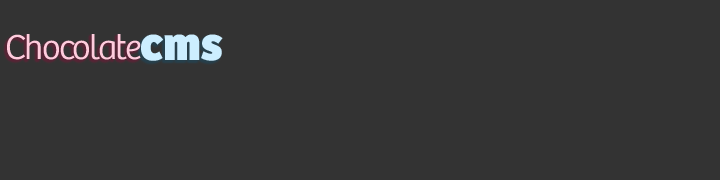
<style>
.page{position:relative;width:720px;height:180px;background:#333333}
.page>*{position:absolute;margin:0}
.t1{font:36px "Bree-Light";letter-spacing:-0.05em;color:#ffccdd}
.t2{font:48px "Bree-ExtraBold";color:#cceeff}
</style>
<div class="page">
<p class="t1" style="left:7px;top:34px;width:134px;height:26px">Chocolate</p>
<p class="t2" style="left:141px;top:34px;width:82px;height:27px">cms</p>
</div>
